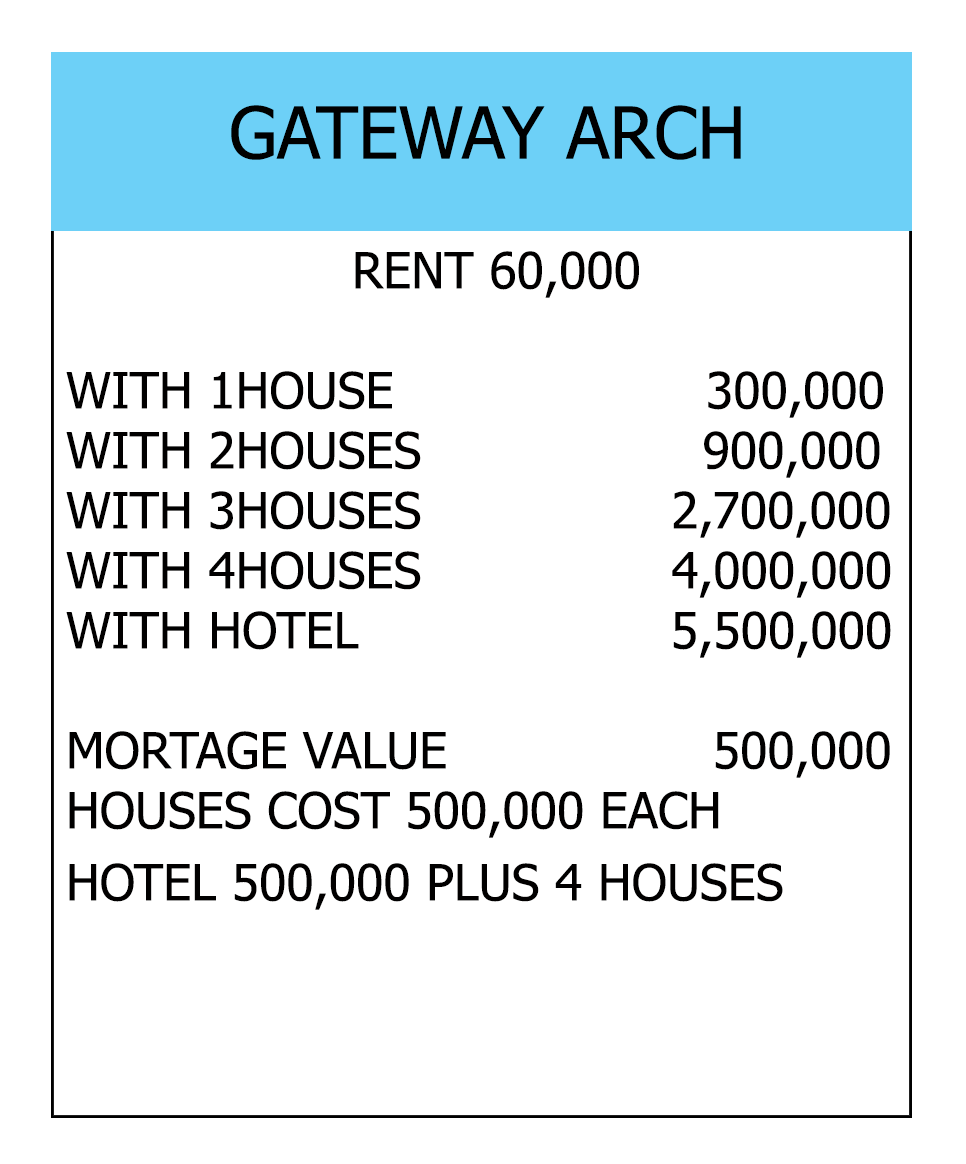
<style>
.page{position:relative;width:966px;height:1164px;background:#ffffff}
.page>*{position:absolute;margin:0}
.t1{font:72px "Tahoma";color:#000000}
.t2{font:50px "Tahoma";color:#010000}
</style>
<div class="page">
<p class="t1" style="left:231px;top:105px;width:510px;height:55px">GATEWAY ARCH</p>
<p class="t2" style="left:66px;top:251px;width:825px;height:659px;text-align:center">RENT 60,000<br><br>WITH 1HOUSE                    300,000<br>WITH 2HOUSES                  900,000<br>WITH 3HOUSES                2,700,000<br>WITH 4HOUSES                4,000,000<br>WITH HOTEL                    5,500,000<br><br>MORTAGE VALUE                 500,000<br>HOUSES COST 500,000 EACH<br>HOTEL 500,000 PLUS 4 HOUSES</p>
</div>
